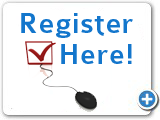
<style>
.page{position:relative;width:160px;height:120px;background:#ffffff}
.page>*{position:absolute;margin:0}
.t1{font:30px "Colaborate-Medium";letter-spacing:0.025em;color:#1376cc}
</style>
<div class="page">
<p class="t1" style="left:21px;top:13px;width:112px;height:25px">Register</p>
<p class="t1" style="left:61px;top:44px;width:71px;height:20px">Here!</p>
</div>
